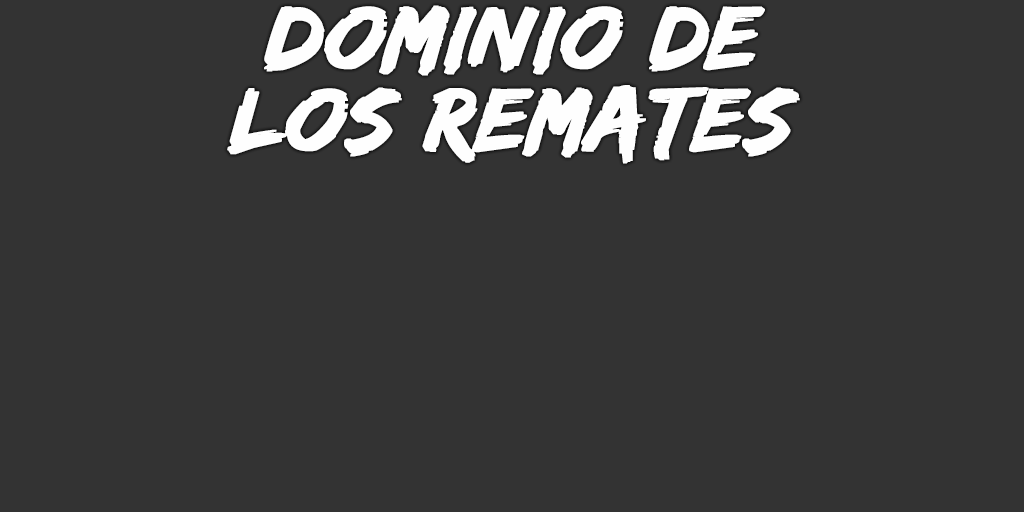
<style>
.page{position:relative;width:1024px;height:512px;background:#333333}
.page>*{position:absolute;margin:0}
.t1{font:93px/82px "EdoSZ";color:#fefefe;font-weight:bold;font-style:italic;scale:1.04 1}
</style>
<div class="page">
<p class="t1" style="left:227px;top:5px;width:573px;height:159px;text-align:center">dominio de<br>los Remates</p>
</div>
